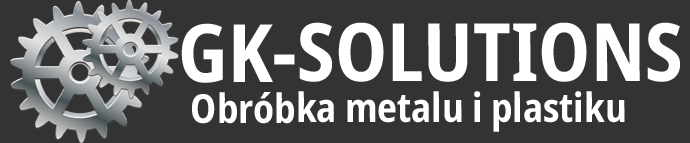
<style>
.page{position:relative;width:690px;height:143px;background:#333333}
.page>*{position:absolute;margin:0}
.t1{font:80.4px "NotoSans-CondensedBold";color:#ffffff}
.t2{font:40.2px "NotoSans-CondensedBold";color:#ffffff}
</style>
<div class="page">
<p class="t1" style="left:181px;top:22px;width:499px;height:61px">GK-SOLUTIONS</p>
<p class="t2" style="left:192px;top:91px;width:433px;height:41px">Obróbka metalu i plastiku</p>
</div>
